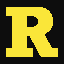
<style>
.page{position:relative;width:64px;height:64px;background:#0d0d0d}
.page>*{position:absolute;margin:0}
.t1{font:72px "Rockwell-Bold";color:#fae639;font-weight:bold}
</style>
<div class="page">
<p class="t1" style="left:6px;top:7px;width:52px;height:50px">R</p>
</div>
